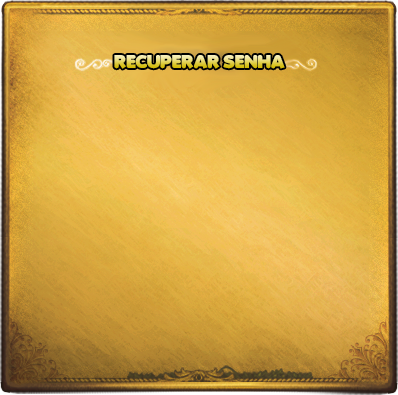
<style>
.page{position:relative;width:398px;height:395px}
.page>*{position:absolute;margin:0}
.t1{font:18px "Folks-Heavy"}
</style>
<div class="page">
<p class="t1" style="left:114px;top:55px;width:171px;height:14px">RECUPERAR SENHA</p>
</div>
